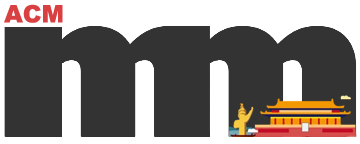
<style>
.page{position:relative;width:360px;height:144px;background:#333333}
.page>*{position:absolute;margin:0}
.t1{font:24px "Arial-Black";color:#d84042}
</style>
<div class="page">
<p class="t1" style="left:4px;top:4px;width:59px;height:19px">ACM</p>
</div>
